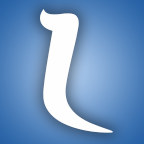
<style>
.page{position:relative;width:144px;height:144px}
.page>*{position:absolute;margin:0}
.t1{font:103px "PrinceofPersia";color:#fefefe}
</style>
<div class="page">
<p class="t1" style="left:40px;top:9px;width:73px;height:124px">L</p>
</div>
